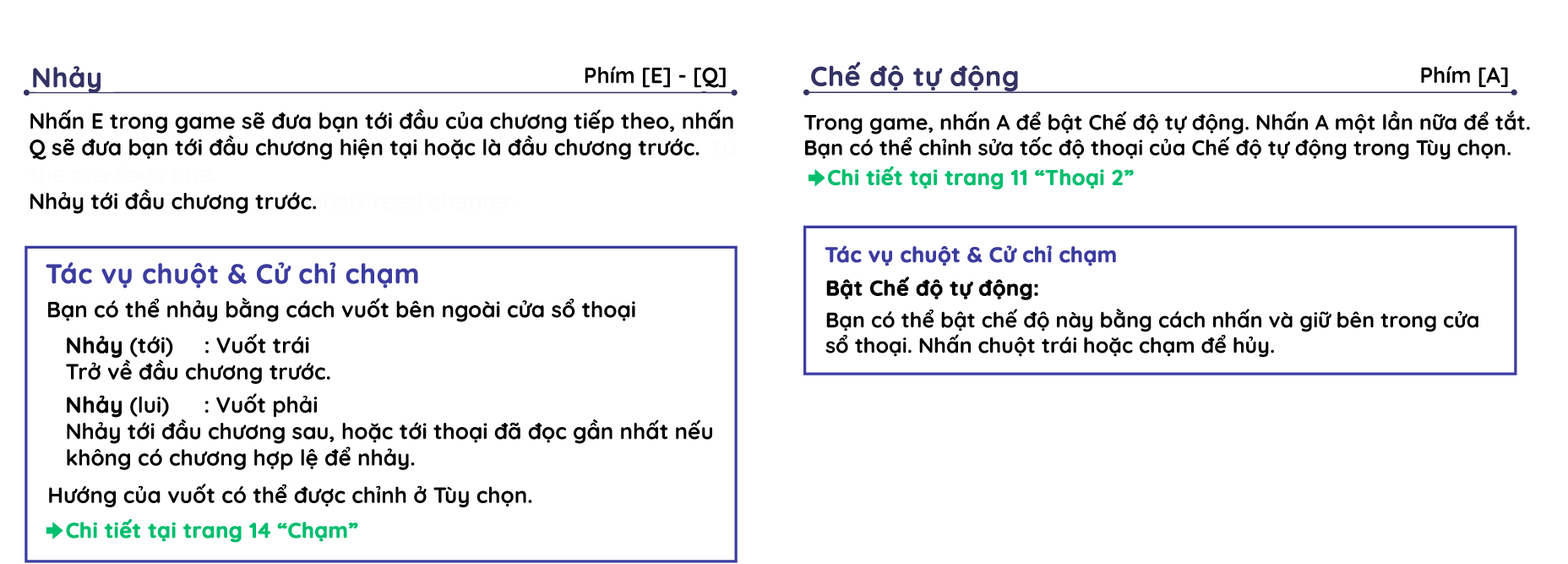
<style>
.page{position:relative;width:1568px;height:564px;background:#ffffff}
.page>*{position:absolute;margin:0}
.t1{font:27px "Quicksand-Bold";color:#323264;font-weight:bold}
.t2{font:22px "Quicksand-Bold";color:#000000}
.t3{font:21.1px "Quicksand-Bold";color:#000000}
.t4{font:21.1px "Quicksand-Bold";color:#00be6e;font-weight:bold}
.t5{font:21.1px "Quicksand-Bold";color:#3c3ca0;font-weight:bold}
.t6{font:27px "Quicksand-Bold";color:#3c3ca0;font-weight:bold}
.t7{font:21.1px "Quicksand-Bold";color:#000000;font-weight:bold}
.t8{font:22px "Quicksand-Bold";color:#000000;font-weight:bold}
</style>
<div class="page">
<p class="t1" style="left:33px;top:66px;width:68px;height:27px">Nhảy</p>
<p class="t2" style="left:585px;top:66px;width:141px;height:22px">Phím [E] - [Q]</p>
<p class="t1" style="left:811px;top:62px;width:207px;height:30px">Chế độ tự động</p>
<p class="t2" style="left:1421px;top:66px;width:87px;height:21px">Phím [A]</p>
<p class="t2" style="left:30px;top:109px;width:703px;height:51px">Nhấn E trong game sẽ đưa bạn tới đầu của chương tiếp theo, nhấn Q sẽ đưa bạn tới đầu chương hiện tại hoặc là đầu chương trước.</p>
<p class="t3" style="left:804px;top:110px;width:726px;height:50px">Trong game, nhấn A để bật Chế độ tự động. Nhấn A một lần nữa để tắt. <br>Bạn có thể chỉnh sửa tốc độ thoại của Chế độ tự động trong Tùy chọn.</p>
<p class="t4" style="left:828px;top:166px;width:306px;height:23px">Chi tiết tại trang 11 “Thoại 2”</p>
<p class="t2" style="left:30px;top:189px;width:286px;height:25px">Nhảy tới đầu chương trước.</p>
<p class="t5" style="left:825px;top:245px;width:291px;height:21px">Tác vụ chuột &amp; Cử chỉ chạm</p>
<p class="t6" style="left:46px;top:262px;width:372px;height:26px">Tác vụ chuột &amp; Cử chỉ chạm</p>
<p class="t3" style="left:825px;top:276px;width:653px;height:81px"><span class="t7">Bật Chế độ tự động:<br></span>Bạn có thể bật chế độ này bằng cách nhấn và giữ bên trong cửa sổ thoại. Nhấn chuột trái hoặc chạm để hủy.</p>
<p class="t2" style="left:48px;top:297px;width:587px;height:25px">Bạn có thể nhảy bằng cách vuốt bên ngoài cửa sổ thoại</p>
<p class="t2" style="left:66px;top:334px;width:646px;height:136px"><span class="t8">Nhảy</span> (tới)     : Vuốt trái<br>Trở về đầu chương trước.<br><span class="t8">Nhảy</span> (lui)                             : Vuốt phải<br>Nhảy tới đầu chương sau, hoặc tới thoại đã đọc gần nhất nếu không có chương hợp lệ để nhảy.</p>
<p class="t2" style="left:49px;top:483px;width:483px;height:24px">Hướng của vuốt có thể được chỉnh ở Tùy chọn.</p>
<p class="t4" style="left:66px;top:519px;width:292px;height:23px">Chi tiết tại trang 14 “Chạm”</p>
</div>
